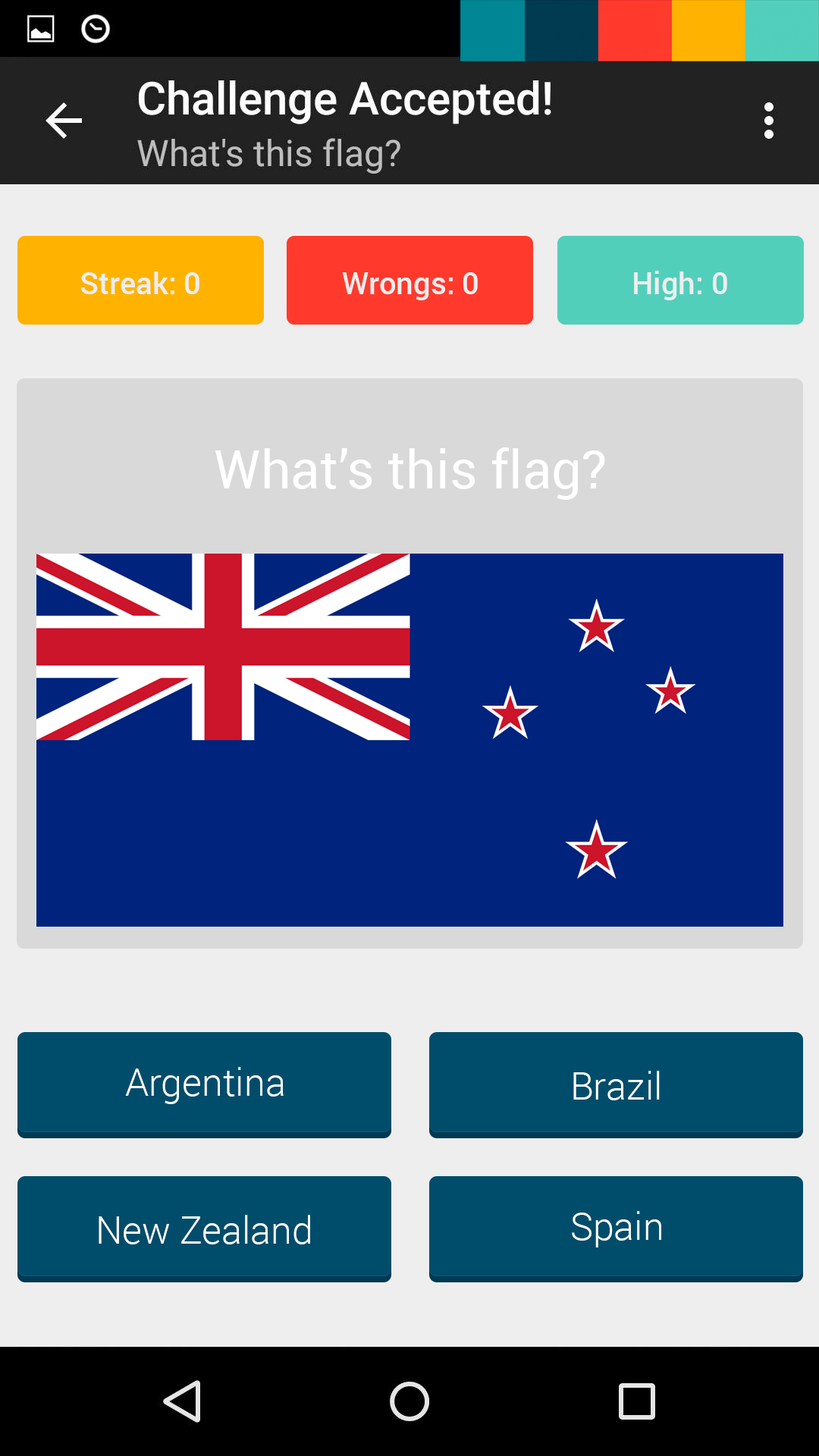
<style>
.page{position:relative;width:819px;height:1456px;background:#eeeeee}
.page>*{position:absolute;margin:0}
.t1{font:30.3px "Roboto-Medium";color:#eeeeee}
.t2{font:53.1px "Roboto-Regular";color:#ffffff}
.t3{font:37.9px "Roboto-Light";color:#ffffff}
</style>
<div class="page">
<p class="t1" style="left:80px;top:271px;width:119px;height:23px">Streak: 0</p>
<p class="t1" style="left:342px;top:272px;width:136px;height:28px">Wrongs: 0</p>
<p class="t1" style="left:634px;top:271px;width:93px;height:29px">High: 0</p>
<p class="t2" style="left:215px;top:447px;width:390px;height:53px">What’s this flag?</p>
<p class="t3" style="left:125px;top:1067px;width:159px;height:37px">Argentina</p>
<p class="t3" style="left:573px;top:1071px;width:87px;height:29px">Brazil</p>
<p class="t3" style="left:99px;top:1215px;width:211px;height:29px">New Zealand</p>
<p class="t3" style="left:572px;top:1211px;width:89px;height:36px">Spain</p>
</div>
